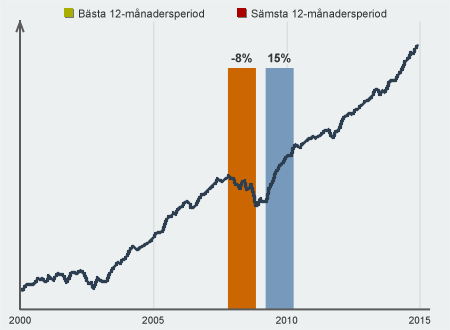
<style>
.page{position:relative;width:450px;height:330px;background:#ecf0f1}
.page>*{position:absolute;margin:0}
.t1{font:11px "ArialMT";color:#333333}
.t2{font:12px "Arial-BoldMT";color:#333333}
.t3{font:10px "ArialMT";color:#333333}
</style>
<div class="page">
<p class="t1" style="left:79px;top:8px;width:125px;height:12px">Bästa 12-månadersperiod</p>
<p class="t1" style="left:251px;top:8px;width:136px;height:12px">Sämsta 12-månadersperiod</p>
<p class="t2" style="left:231px;top:53px;width:21px;height:10px">-8%</p>
<p class="t2" style="left:268px;top:53px;width:23px;height:10px">15%</p>
<p class="t3" style="left:9px;top:316px;width:22px;height:8px">2000</p>
<p class="t3" style="left:142px;top:316px;width:22px;height:8px">2005</p>
<p class="t3" style="left:276px;top:316px;width:22px;height:8px">2010</p>
<p class="t3" style="left:409px;top:316px;width:22px;height:8px">2015</p>
</div>
